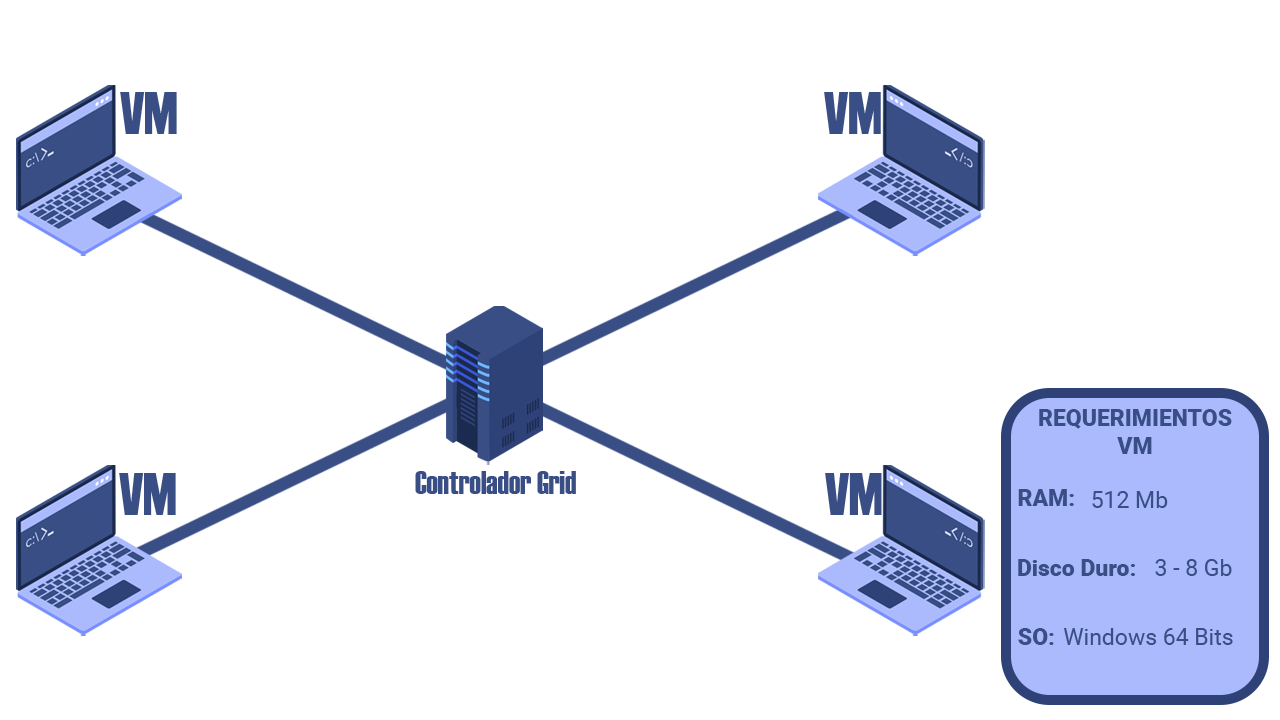
<style>
.page{position:relative;width:1280px;height:720px;background:#ffffff}
.page>*{position:absolute;margin:0}
.t1{font:58.5px "Haettenschweiler";color:#384e85}
.t2{font:23px "Roboto-Black";color:#384e85}
.t3{font:31.5px "Haettenschweiler";color:#384e85}
.t4{font:23px "Roboto-Regular";color:#384e85}
</style>
<div class="page">
<p class="t1" style="left:120px;top:92px;width:57px;height:42px">VM</p>
<p class="t1" style="left:824px;top:92px;width:57px;height:42px;rotate:180deg">MV</p>
<p class="t2" style="left:1039px;top:409px;width:193px;height:45px;text-align:center">REQUERIMIENTOS<br>VM</p>
<p class="t1" style="left:119px;top:473px;width:57px;height:42px">VM</p>
<p class="t3" style="left:415px;top:471px;width:161px;height:23px">Controlador Grid</p>
<p class="t1" style="left:825px;top:473px;width:57px;height:42px;rotate:180deg">MV</p>
<p class="t2" style="left:1018px;top:489px;width:56px;height:17px">RAM:</p>
<p class="t4" style="left:1092px;top:491px;width:76px;height:17px">512 Mb</p>
<p class="t2" style="left:1018px;top:559px;width:117px;height:17px">Disco Duro:</p>
<p class="t4" style="left:1155px;top:559px;width:77px;height:17px">3 - 8 Gb</p>
<p class="t2" style="left:1018px;top:628px;width:36px;height:17px">SO:</p>
<p class="t4" style="left:1063px;top:628px;width:170px;height:17px">Windows 64 Bits</p>
</div>
